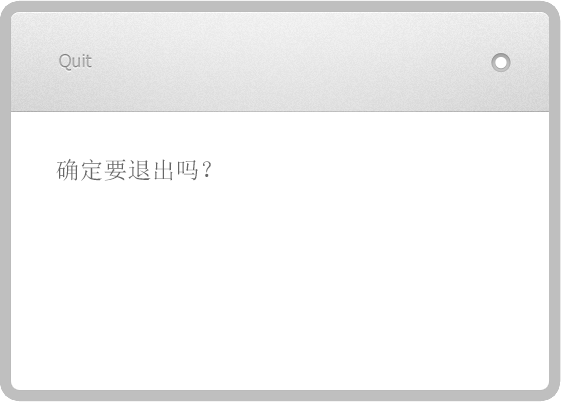
<style>
.page{position:relative;width:561px;height:402px;background:#ffffff}
.page>*{position:absolute;margin:0}
.t1{font:18px "Tahoma";color:#aaaaaa}
.t2{font:24px "SimSun";color:#666666}
</style>
<div class="page">
<p class="t1" style="left:59px;top:54px;width:33px;height:17px">Quit</p>
<p class="t2" style="left:56px;top:158px;width:155px;height:23px">确定要退出吗？</p>
</div>
